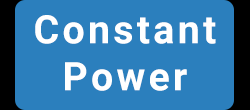
<style>
.page{position:relative;width:250px;height:110px;background:#2b7fbd}
.page>*{position:absolute;margin:0}
.t1{font:39.2px "Roboto-Bold";letter-spacing:0.085em;color:#ffffff}
</style>
<div class="page">
<p class="t1" style="left:35px;top:15px;width:181px;height:76px;text-align:center">Constant<br>Power</p>
</div>
